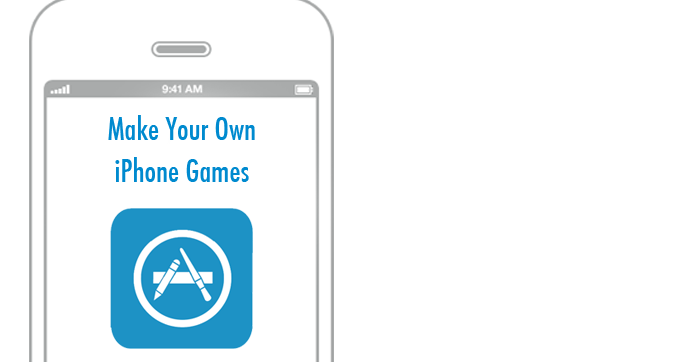
<style>
.page{position:relative;width:700px;height:362px;background:#ffffff}
.page>*{position:absolute;margin:0}
.t1{font:29.9px/41.9px "Futura-CondensedMedium";color:#008acf}
</style>
<div class="page">
<p class="t1" style="left:108px;top:115px;width:147px;height:67px;text-align:center">Make Your Own<br>iPhone Games</p>
</div>
